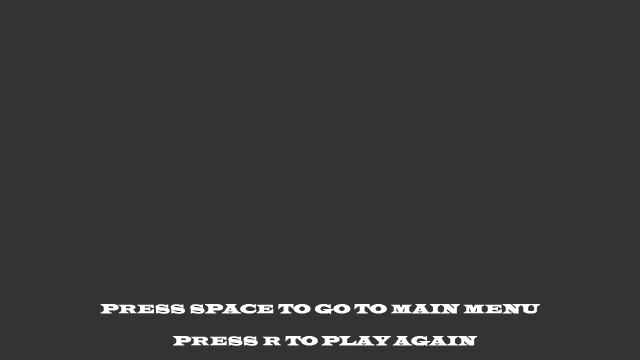
<style>
.page{position:relative;width:640px;height:360px;background:#333333}
.page>*{position:absolute;margin:0}
.t1{font:12.5px "LatinWide";color:#ffffff;text-transform:uppercase;font-weight:bold}
</style>
<div class="page">
<p class="t1" style="left:100px;top:304px;width:441px;height:10px">Press SPACE to go to main menu</p>
<p class="t1" style="left:173px;top:336px;width:305px;height:10px">Press R to play again</p>
</div>
